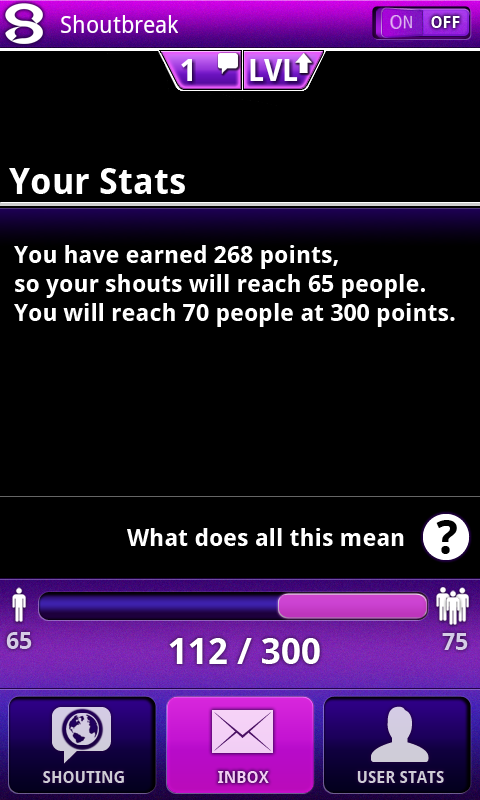
<style>
.page{position:relative;width:480px;height:800px;background:#000000}
.page>*{position:absolute;margin:0}
.t1{font:36px "DroidSans-Bold";color:#ffffff}
.t2{font:24px "DroidSans-Bold";color:#ffffff}
.t3{font:24px "DroidSans-Bold";color:#d5cce6}
.t4{font:16px "DroidSans-Bold";color:#cdccd4}
.t5{font:16px "DroidSans-Bold";color:#f1cef2}
</style>
<div class="page">
<p class="t1" style="left:9px;top:168px;width:176px;height:26px">Your Stats</p>
<p class="t2" style="left:14px;top:245px;width:441px;height:82px">You have earned 268 points,<br>so your shouts will reach 65 people.<br>You will reach 70 people at 300 points.</p>
<p class="t2" style="left:127px;top:528px;width:277px;height:18px">What does all this mean</p>
<p class="t3" style="left:6px;top:632px;width:26px;height:17px">65</p>
<p class="t1" style="left:169px;top:638px;width:151px;height:26px">112 / 300</p>
<p class="t3" style="left:442px;top:633px;width:26px;height:17px">75</p>
<p class="t4" style="left:43px;top:771px;width:81px;height:12px">SHOUTING</p>
<p class="t5" style="left:218px;top:771px;width:51px;height:12px">INBOX</p>
<p class="t4" style="left:357px;top:771px;width:87px;height:12px">USER STATS</p>
</div>
